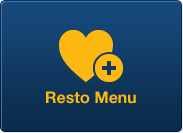
<style>
.page{position:relative;width:183px;height:133px}
.page>*{position:absolute;margin:0}
.t1{font:16px "HelveticaNeueLTStd-Bd";color:#fdb812}
</style>
<div class="page">
<p class="t1" style="left:46px;top:91px;width:90px;height:13px">Resto Menu</p>
</div>
